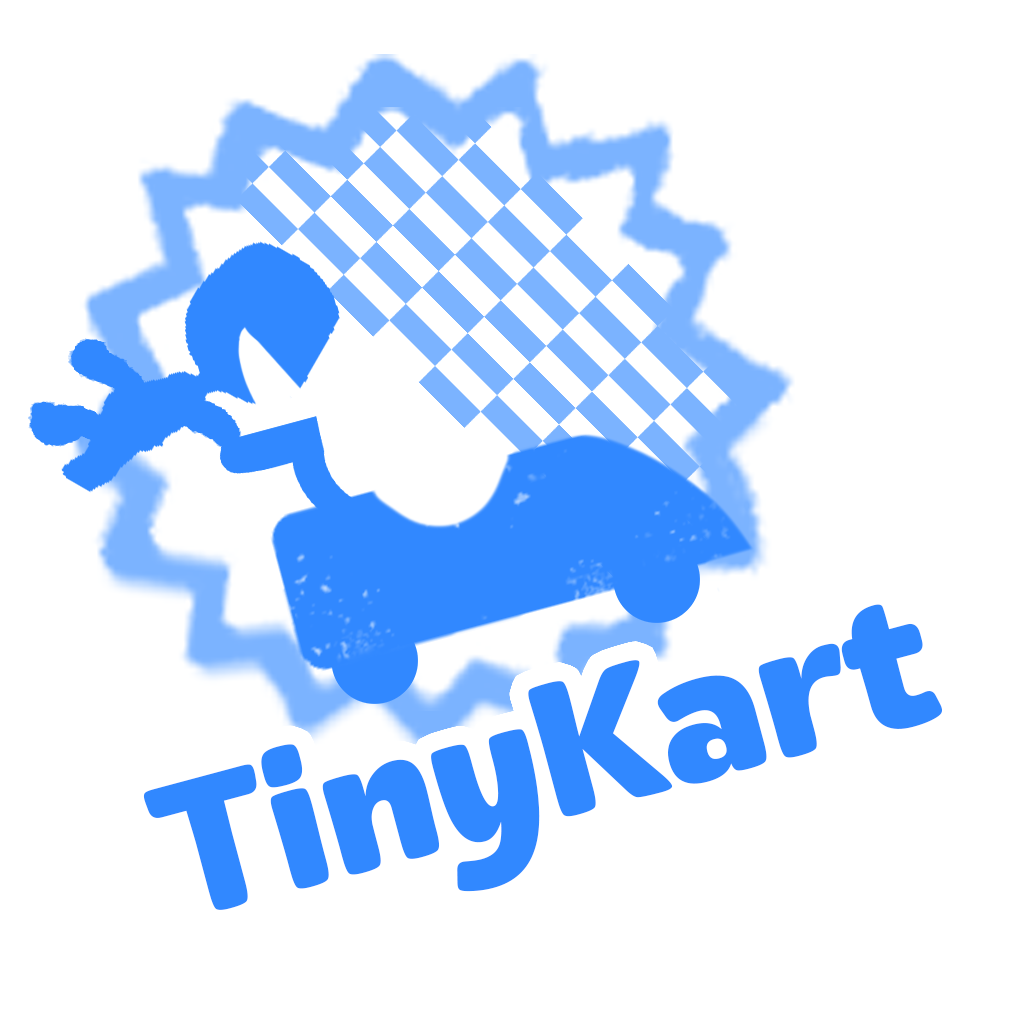
<style>
.page{position:relative;width:1024px;height:1024px;background:#ffffff}
.page>*{position:absolute;margin:0}
.t1{font:187px "EigerdalsHeavy";color:#3188ff}
</style>
<div class="page">
<p class="t1" style="left:143px;top:604px;width:799px;height:306px;rotate:-15deg">TinyKart</p>
</div>
